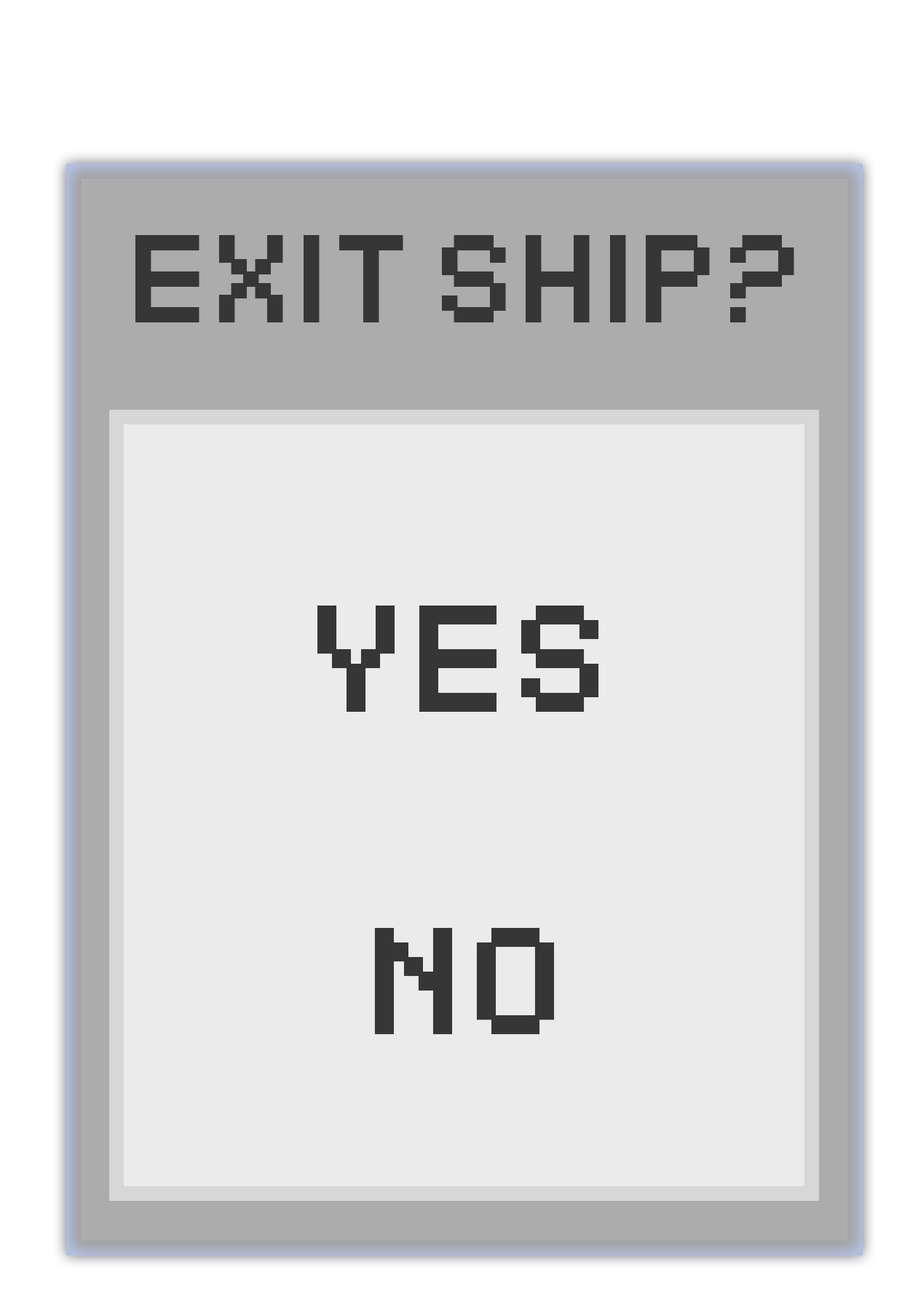
<style>
.page{position:relative;width:910px;height:1310px;background:#ebebeb}
.page>*{position:absolute;margin:0}
.t1{font:120px "SFPixelate-Bold";color:#363636}
.t2{font:145.6px "SFPixelate-Bold";color:#363636}
</style>
<div class="page">
<p class="t1" style="left:135px;top:235px;width:659px;height:87px">EXIT SHIP?</p>
<p class="t2" style="left:317px;top:606px;width:282px;height:106px">YES</p>
<p class="t2" style="left:374px;top:928px;width:181px;height:106px">NO</p>
</div>
